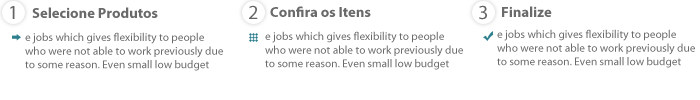
<style>
.page{position:relative;width:700px;height:100px;background:#ffffff}
.page>*{position:absolute;margin:0}
.t1{font:20px "MyriadPro-Regular";color:#636363}
.t2{font:14.7px "MyriadPro-Bold";color:#6a6a6a}
.t3{font:11.3px "MyriadPro-Regular";color:#6a6a6a}
</style>
<div class="page">
<p class="t1" style="left:10px;top:6px;width:5px;height:13px">1</p>
<p class="t1" style="left:249px;top:5px;width:9px;height:14px">2</p>
<p class="t2" style="left:270px;top:6px;width:101px;height:11px">Confira os Itens</p>
<p class="t1" style="left:479px;top:5px;width:8px;height:15px">3</p>
<p class="t2" style="left:502px;top:6px;width:50px;height:11px">Finalize</p>
<p class="t2" style="left:32px;top:7px;width:126px;height:11px">Selecione Produtos</p>
<p class="t3" style="left:497px;top:29px;width:198px;height:39px">e jobs which gives flexibility to people who were not able to work previously due to some reason. Even small low budget</p>
<p class="t3" style="left:25px;top:32px;width:198px;height:39px">e jobs which gives flexibility to people who were not able to work previously due to some reason. Even small low budget</p>
<p class="t3" style="left:265px;top:31px;width:198px;height:39px">e jobs which gives flexibility to people who were not able to work previously due to some reason. Even small low budget</p>
</div>
